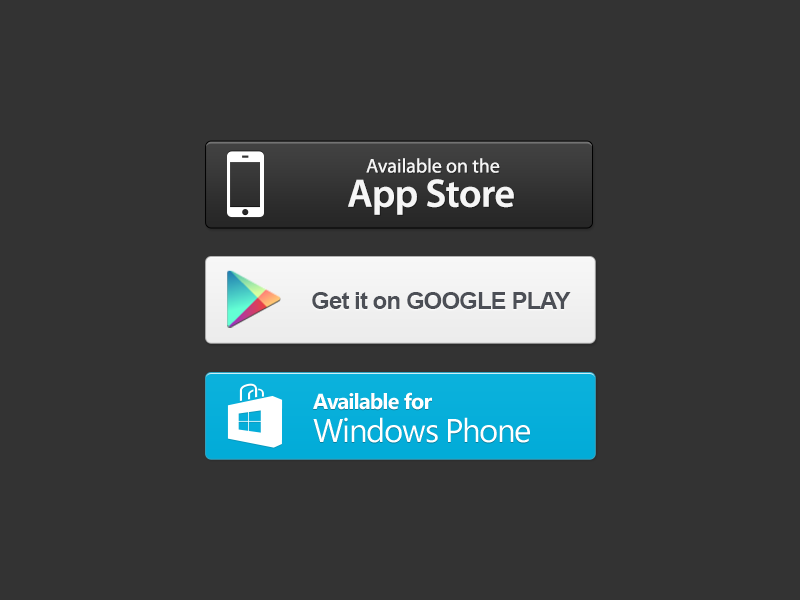
<style>
.page{position:relative;width:800px;height:600px;background:#333333}
.page>*{position:absolute;margin:0}
.t1{font:19.9px "MyriadPro-Regular";color:#ffffff}
.t2{font:39.8px "MyriadPro-Semibold";letter-spacing:-0.01em;color:#ffffff}
.t3{font:24px "Arial-BoldMT";letter-spacing:-0.04em;color:#4c4f56;text-transform:uppercase}
.t4{font:24px "Arial-BoldMT";letter-spacing:-0.04em;color:#4c4f56}
.t5{font:21.7px "SegoeUI-Bold";letter-spacing:-0.04em;color:#ffffff}
.t6{font:32.8px/33.5px "SegoeUI";letter-spacing:-0.04em;color:#ffffff}
</style>
<div class="page">
<p class="t1" style="left:366px;top:158px;width:134px;height:15px;opacity:0.94">Available on the</p>
<p class="t2" style="left:348px;top:179px;width:166px;height:36px;opacity:0.94">App Store</p>
<p class="t3" style="left:312px;top:292px;width:259px;height:17px"><span class="t4">Get it on</span> google play</p>
<p class="t5" style="left:313px;top:392px;width:217px;height:51px">Available for<br><span class="t6">Windows Phone</span></p>
</div>
